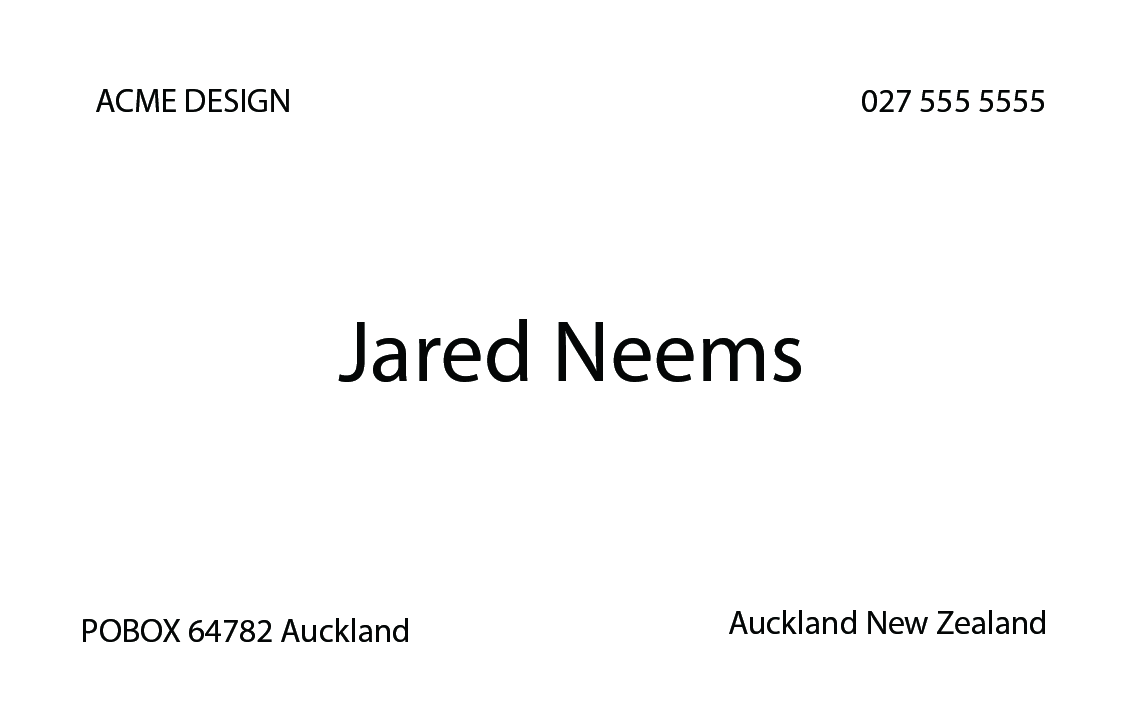
<style>
.page{position:relative;width:1146px;height:720px;background:#ffffff}
.page>*{position:absolute;margin:0}
.t1{font:33.3px "MyriadPro-Regular";color:#040606}
.t2{font:87.5px "MyriadPro-Regular";color:#040606}
</style>
<div class="page">
<p class="t1" style="left:96px;top:89px;width:193px;height:23px">ACME DESIGN</p>
<p class="t1" style="left:862px;top:90px;width:182px;height:22px">027 555 5555</p>
<p class="t2" style="left:338px;top:319px;width:463px;height:63px">Jared Neems</p>
<p class="t1" style="left:729px;top:610px;width:316px;height:24px">Auckland New Zealand</p>
<p class="t1" style="left:83px;top:618px;width:325px;height:24px">POBOX 64782 Auckland</p>
</div>
